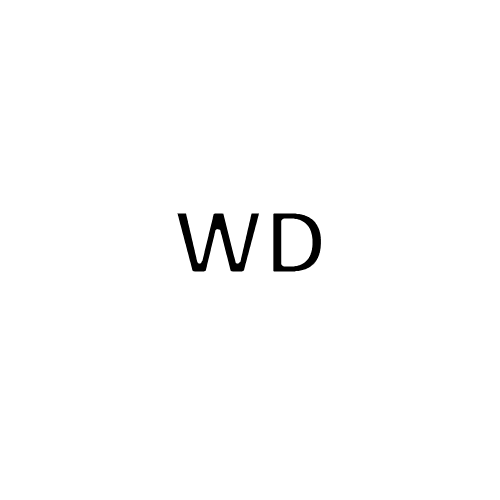
<style>
.page{position:relative;width:500px;height:500px;background:#ffffff}
.page>*{position:absolute;margin:0}
.t1{font:100px "Calibri-Bold"}
</style>
<div class="page">
<p class="t1" style="left:175px;top:211px;width:149px;height:63px">WD</p>
</div>
